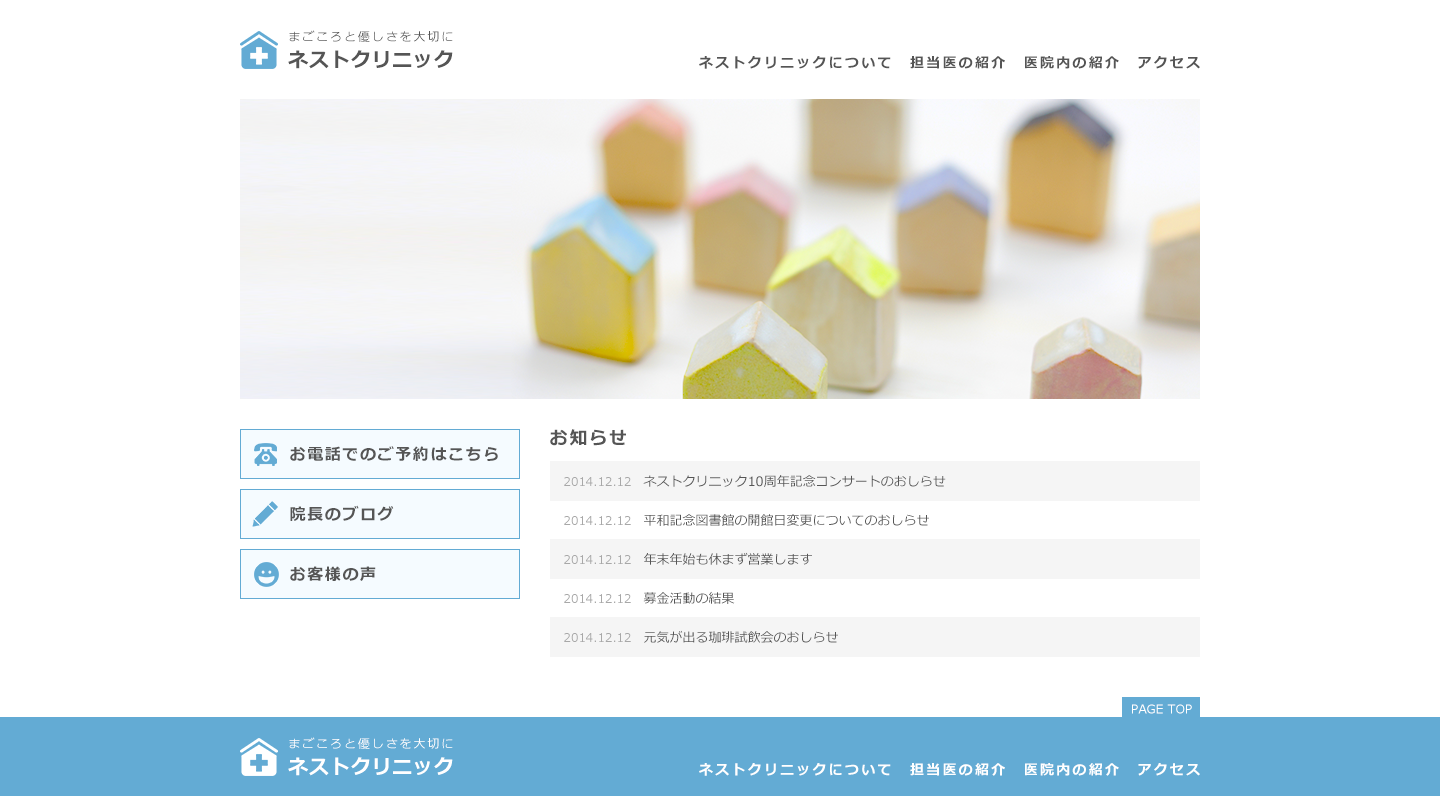
<style>
.page{position:relative;width:1440px;height:796px;background:#ffffff}
.page>*{position:absolute;margin:0}
.t1{font:12px/26px "Meiryo";letter-spacing:0.16em;color:#555555}
.t2{font:20px/26px "Meiryo-Bold";letter-spacing:0.04em;color:#555555}
.t3{font:14px "Meiryo-Bold";letter-spacing:0.16em;color:#555555}
.t4{font:18px "Meiryo-Bold";letter-spacing:0.1em;color:#555555}
.t5{font:16px "Meiryo-Bold";letter-spacing:0.1em;color:#555555}
.t6{font:13px/39px "Meiryo";color:#555555}
.t7{font:12px/39px "Meiryo";color:#a8a8a8}
.t8{font:12px "Meiryo";letter-spacing:0.02em;color:#ffffff}
.t9{font:12px/26px "Meiryo";letter-spacing:0.16em;color:#ffffff}
.t10{font:20px/26px "Meiryo-Bold";letter-spacing:0.04em;color:#ffffff}
.t11{font:14px "Meiryo-Bold";letter-spacing:0.16em;color:#ffffff}
</style>
<div class="page">
<p class="t1" style="left:288px;top:30px;width:165px;height:39px">まごころと優しさを大切に<br><span class="t2">ネストクリニック</span></p>
<p class="t3" style="left:699px;top:56px;width:501px;height:13px">ネストクリニックについて　担当医の紹介　医院内の紹介　アクセス</p>
<p class="t4" style="left:550px;top:429px;width:76px;height:17px">お知らせ</p>
<p class="t5" style="left:290px;top:446px;width:208px;height:15px">お電話でのご予約はこちら</p>
<p class="t6" style="left:564px;top:475px;width:382px;height:168px"><span class="t7">2014.12.12　</span>ネストクリニック10周年記念コンサートのおしらせ<br><span class="t7">2014.12.12　</span>平和記念図書館の開館日変更についてのおしらせ<br><span class="t7">2014.12.12　</span>年末年始も休まず営業します<br><span class="t7">2014.12.12　</span>募金活動の結果<br><span class="t7">2014.12.12　</span>元気が出る珈琲試飲会のおしらせ</p>
<p class="t5" style="left:290px;top:505px;width:104px;height:16px">院長のブログ</p>
<p class="t5" style="left:290px;top:566px;width:86px;height:15px">お客様の声</p>
<p class="t8" style="left:1132px;top:704px;width:60px;height:10px">PAGE TOP</p>
<p class="t9" style="left:288px;top:737px;width:165px;height:39px">まごころと優しさを大切に<br><span class="t10">ネストクリニック</span></p>
<p class="t11" style="left:699px;top:763px;width:501px;height:13px">ネストクリニックについて　担当医の紹介　医院内の紹介　アクセス</p>
</div>
